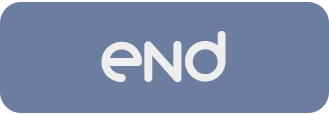
<style>
.page{position:relative;width:329px;height:114px;background:#6c7e9f}
.page>*{position:absolute;margin:0}
.t1{font:62.5px "Organocoloredversionat:logomagazin.comorgano-font";letter-spacing:-0.02em;color:#eeeeee}
</style>
<div class="page">
<p class="t1" style="left:101px;top:31px;width:125px;height:51px">END</p>
</div>
